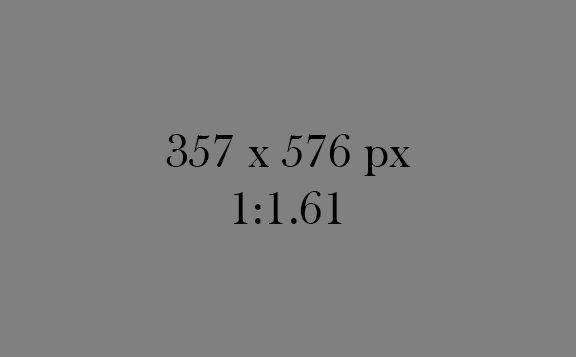
<style>
.page{position:relative;width:576px;height:357px;background:#808080}
.page>*{position:absolute;margin:0}
.t1{font:48px "BaskOldFace";color:#000000}
</style>
<div class="page">
<p class="t1" style="left:166px;top:134px;width:244px;height:90px;text-align:center">357 x 576 px<br>1:1.61</p>
</div>
